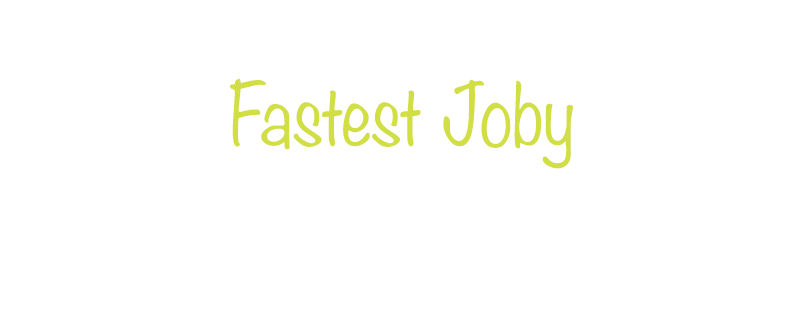
<style>
.page{position:relative;width:800px;height:320px;background:#ffffff}
.page>*{position:absolute;margin:0}
.t1{font:76.8px "Noteworthy-Light";color:#d1de44;scale:0.94 1}
</style>
<div class="page">
<p class="t1" style="left:229px;top:78px;width:344px;height:91px">Fastest Joby</p>
</div>
